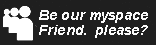
<style>
.page{position:relative;width:156px;height:45px;background:#1f1f1f}
.page>*{position:absolute;margin:0}
.t1{font:14px/24px "Arial-BoldItalicMT";letter-spacing:0.01em;color:#fafafa}
</style>
<div class="page">
<p class="t1" style="left:39px;top:10px;width:109px;height:28px">Be our myspace <br>Friend.  please?</p>
</div>
